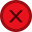
<style>
.page{position:relative;width:32px;height:32px;background:#e9131d}
.page>*{position:absolute;margin:0}
.t1{font:16.4px "SFProDisplay-Light";color:#450609;font-weight:bold;scale:1.33 1}
</style>
<div class="page">
<p class="t1" style="left:9px;top:10px;width:14px;height:13px">X</p>
</div>
